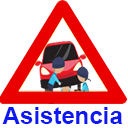
<style>
.page{position:relative;width:128px;height:128px;background:#ffffff}
.page>*{position:absolute;margin:0}
.t1{font:24px "Arial-BoldMT";color:#0d18f3}
</style>
<div class="page">
<p class="t1" style="left:2px;top:107px;width:121px;height:17px">Asistencia</p>
</div>
